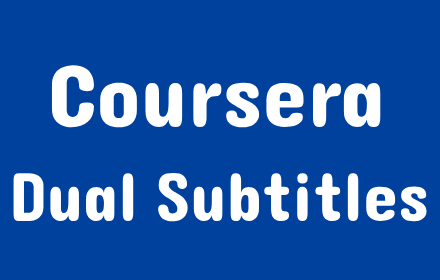
<style>
.page{position:relative;width:440px;height:280px;background:#00419e}
.page>*{position:absolute;margin:0}
.t1{font:90px "Dangrek-Regular";color:#ffffff}
.t2{font:70px "Dangrek-Regular";color:#ffffff}
</style>
<div class="page">
<p class="t1" style="left:51px;top:65px;width:330px;height:63px">Coursera</p>
<p class="t2" style="left:13px;top:172px;width:414px;height:50px">Dual Subtitles</p>
</div>
